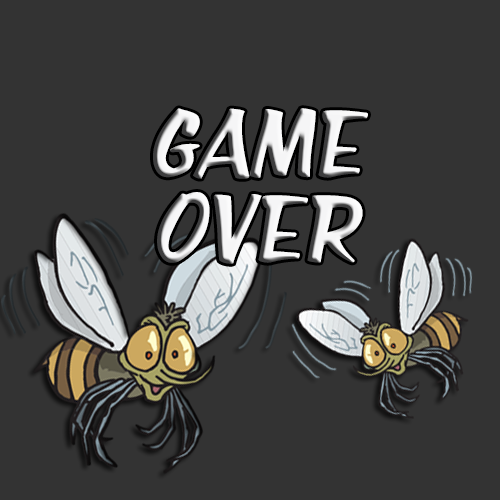
<style>
.page{position:relative;width:500px;height:500px;background:#333333}
.page>*{position:absolute;margin:0}
.t1{font:70.7px "SilverAgeQueens";color:#f5f5f6;scale:1.15 1}
</style>
<div class="page">
<p class="t1" style="left:153px;top:108px;width:215px;height:156px;text-align:center">GAME<br>OVER</p>
</div>
